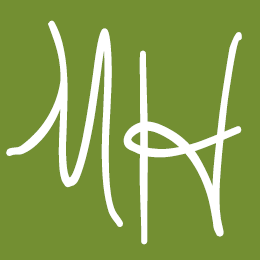
<style>
.page{position:relative;width:260px;height:260px;background:#738f32}
.page>*{position:absolute;margin:0}
.t1{font:180.8px "SweetlyBroken";letter-spacing:0.04em;color:#ffffff;font-weight:bold;scale:0.65 1}
</style>
<div class="page">
<p class="t1" style="left:6px;top:20px;width:236px;height:225px">MH</p>
</div>
